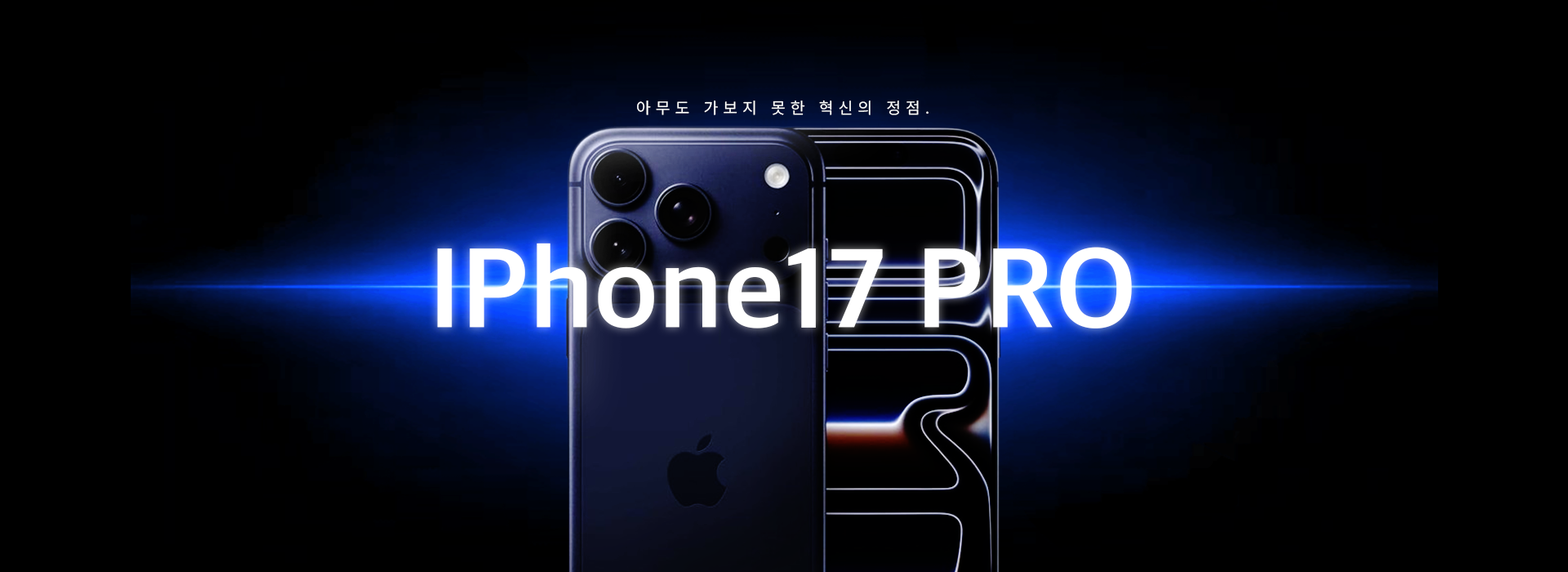
<style>
.page{position:relative;width:1568px;height:572px;background:#000000}
.page>*{position:absolute;margin:0}
.t1{font:16.3px "Pretendard-Regular";letter-spacing:0.32em;color:#ffffff}
.t2{font:114.3px "AppleSDGothicNeoB00";color:#ffffff}
</style>
<div class="page">
<p class="t1" style="left:637px;top:100px;width:292px;height:15px">아무도 가보지 못한 혁신의 정점.</p>
<p class="t2" style="left:437px;top:243px;width:695px;height:85px">IPhone17 PRO</p>
</div>
